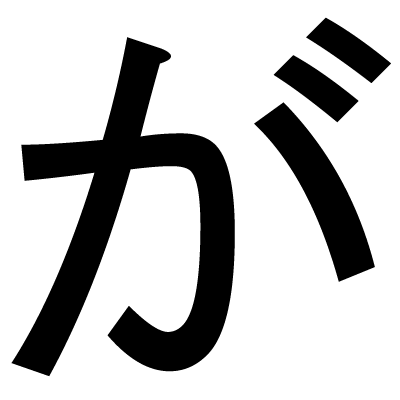
<style>
.page{position:relative;width:400px;height:400px;background:#ffffff}
.page>*{position:absolute;margin:0}
.t1{font:416.7px "MS-PGothic";color:#000000}
</style>
<div class="page">
<p class="t1" style="left:11px;top:17px;width:380px;height:360px">が</p>
</div>
